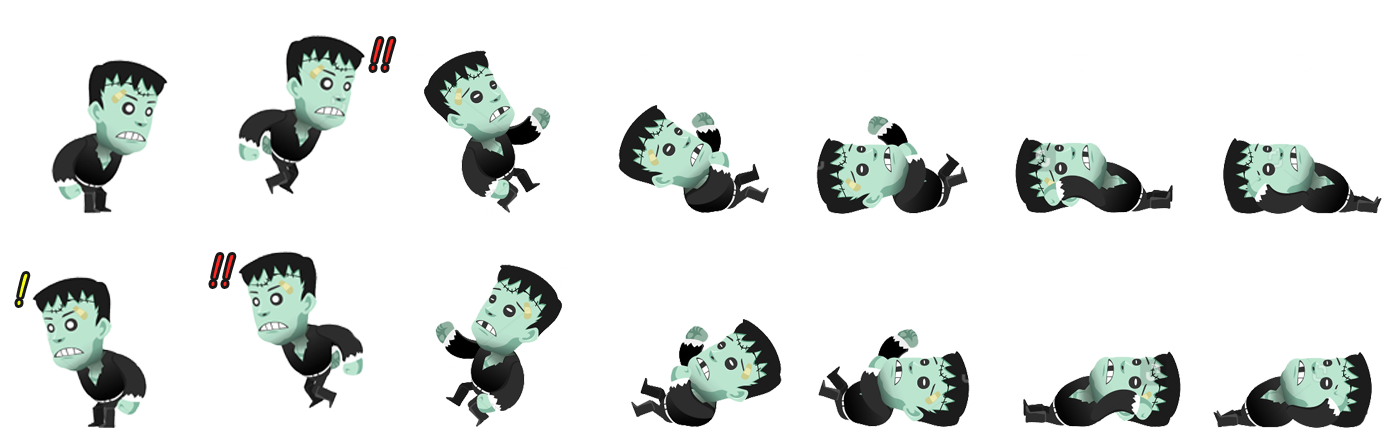
<style>
.page{position:relative;width:1400px;height:428px;background:#ffffff}
.page>*{position:absolute;margin:0}
.t1{font:41.7px "PyunjiR-HM";color:#fe2722}
.t2{font:41.7px "PyunjiR-HM";color:#f7ff15}
</style>
<div class="page">
<p class="t1" style="left:371px;top:39px;width:23px;height:31px">!!</p>
<p class="t1" style="left:211px;top:255px;width:23px;height:31px">!!</p>
<p class="t2" style="left:17px;top:274px;width:11px;height:31px">!</p>
</div>
